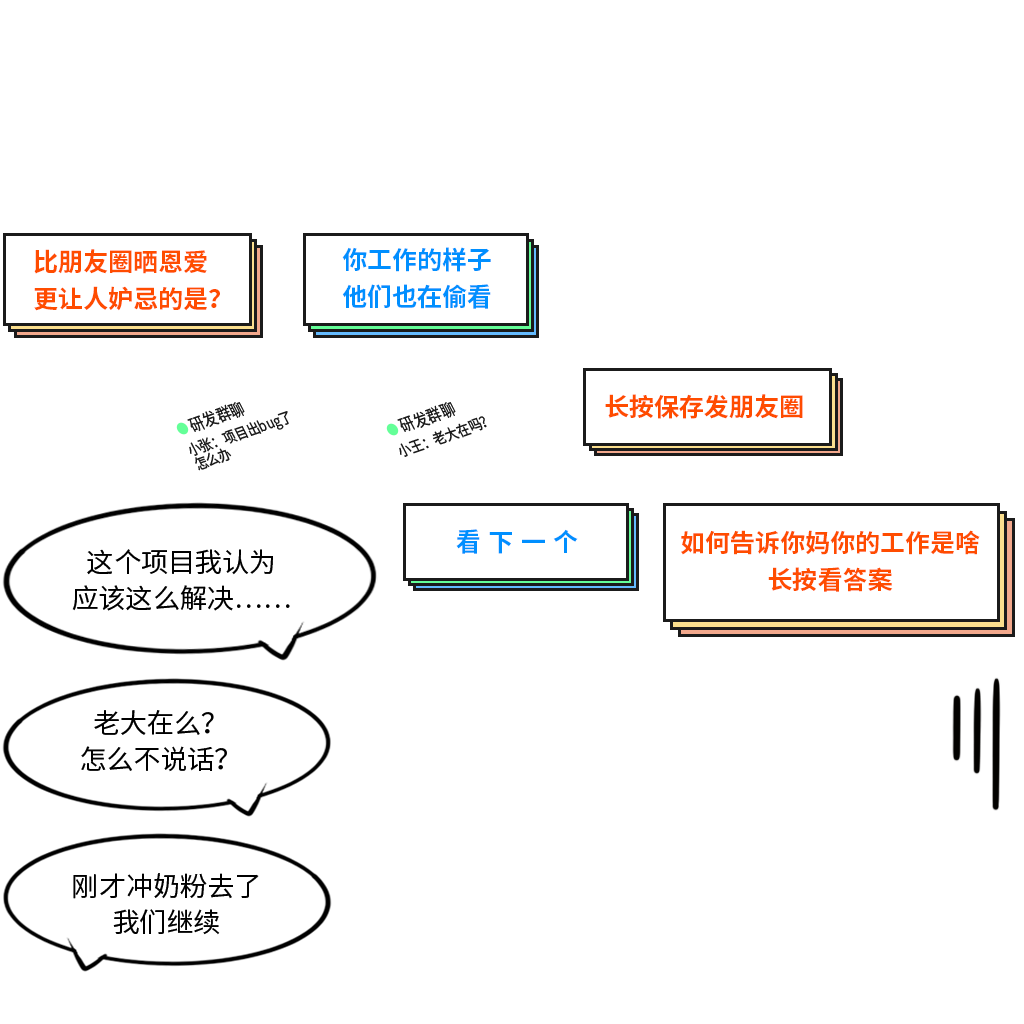
<style>
.page{position:relative;width:1024px;height:1024px;background:#ffffff}
.page>*{position:absolute;margin:0}
.t1{font:25px/37px "SourceHanSansCN-Bold";color:#ff4c00}
.t2{font:25px/37px "SourceHanSansCN-Bold";color:#008fff}
.t3{font:25px "SourceHanSansCN-Bold";color:#ff4c00}
.t4{font:17.4px "SourceHanSansCN-Regular";color:#1b1b1b;scale:0.82 1}
.t5{font:15.2px/15.2px "SourceHanSansCN-Regular";color:#1b1b1b;scale:0.82 1}
.t6{font:15.2px "SourceHanSansCN-Regular";color:#1b1b1b;scale:0.82 1}
.t7{font:25px "SourceHanSansCN-Bold";letter-spacing:0.3em;color:#008fff}
.t8{font:27.1px/35.4px "SourceHanSansCN-Regular";color:#000000}
</style>
<div class="page">
<p class="t1" style="left:34px;top:249px;width:186px;height:62px">比朋友圈晒恩爱<br>更让人妒忌的是？</p>
<p class="t2" style="left:342px;top:247px;width:149px;height:62px">你工作的样子<br>他们也在偷看</p>
<p class="t3" style="left:605px;top:394px;width:198px;height:25px">长按保存发朋友圈</p>
<p class="t4" style="left:187px;top:402px;width:58px;height:30px;rotate:-19deg">研发群聊</p>
<p class="t5" style="left:189px;top:411px;width:100px;height:60px;rotate:-19deg">小张：项目出bug了<br>怎么办</p>
<p class="t4" style="left:397px;top:402px;width:59px;height:30px;rotate:-19deg">研发群聊</p>
<p class="t6" style="left:399px;top:416px;width:88px;height:41px;rotate:-19deg">小王：老大在吗？</p>
<p class="t7" style="left:456px;top:529px;width:122px;height:25px">看下一个</p>
<p class="t1" style="left:681px;top:530px;width:299px;height:62px;text-align:center">如何告诉你妈你的工作是啥<br>长按看答案</p>
<p class="t8" style="left:72px;top:549px;width:218px;height:62px;text-align:center">这个项目我认为<br>应该这么解决……</p>
<p class="t8" style="left:81px;top:710px;width:146px;height:62px;text-align:center">老大在么？<br>怎么不说话？</p>
<p class="t8" style="left:73px;top:873px;width:186px;height:62px;text-align:center">刚才冲奶粉去了<br>我们继续</p>
</div>
